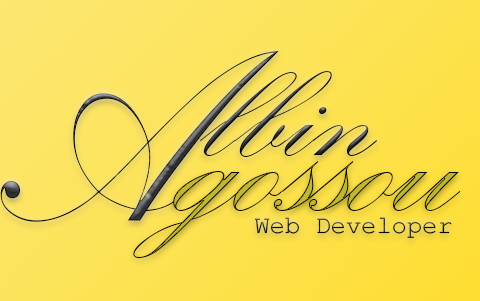
<style>
.page{position:relative;width:480px;height:301px}
.page>*{position:absolute;margin:0}
.t1{font:250px "KunstlerScript";scale:0.9 1}
.t2{font:155.7px "KunstlerScript";scale:1.07 1}
.t3{font:200px "KunstlerScript"}
.t4{font:25px "CourierNewPSMT";color:#0c0c0c}
</style>
<div class="page">
<p class="t1" style="left:0px;top:51px;width:279px;height:171px;rotate:1deg">A</p>
<p class="t2" style="left:199px;top:71px;width:179px;height:86px">lbin</p>
<p class="t3" style="left:133px;top:161px;width:328px;height:97px">gossou</p>
<p class="t4" style="left:254px;top:217px;width:198px;height:21px">Web Developer</p>
</div>
